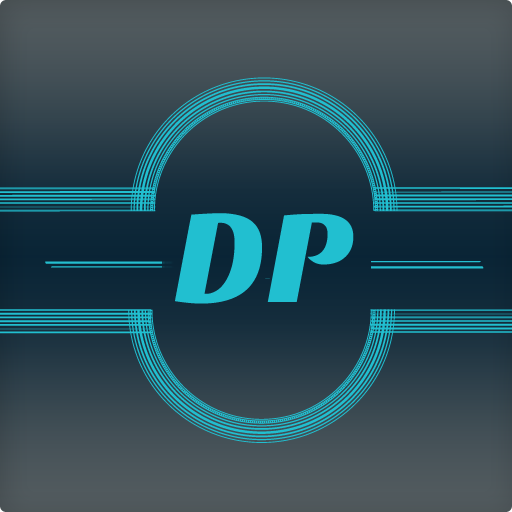
<style>
.page{position:relative;width:512px;height:512px}
.page>*{position:absolute;margin:0}
.t1{font:132px "SansitaOne";color:#21bfd0}
</style>
<div class="page">
<p class="t1" style="left:175px;top:213px;width:179px;height:91px">DP</p>
</div>
